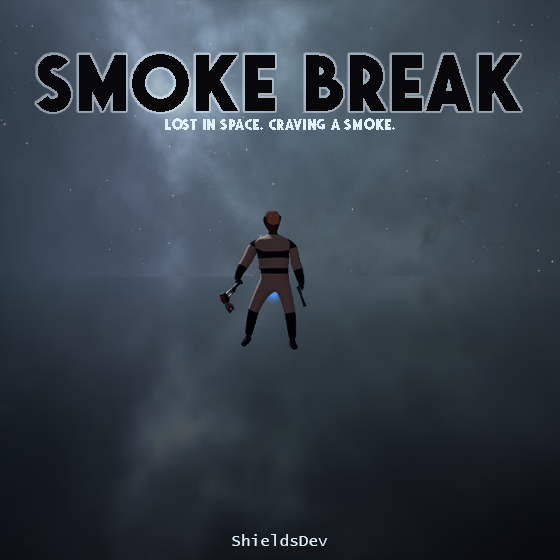
<style>
.page{position:relative;width:560px;height:560px}
.page>*{position:absolute;margin:0}
.t1{font:80px "SaveurSans-Bold";color:#08080b}
.t2{font:16px "SaveurSans-Bold";color:#e1f2fe}
.t3{font:16px "LucidaConsole";color:#e1f2fe}
</style>
<div class="page">
<p class="t1" style="left:37px;top:54px;width:484px;height:58px">SMOKE BREAK</p>
<p class="t2" style="left:165px;top:118px;width:230px;height:12px">Lost in space. Craving a smoke.</p>
<p class="t3" style="left:232px;top:534px;width:96px;height:12px">ShieldsDev</p>
</div>
